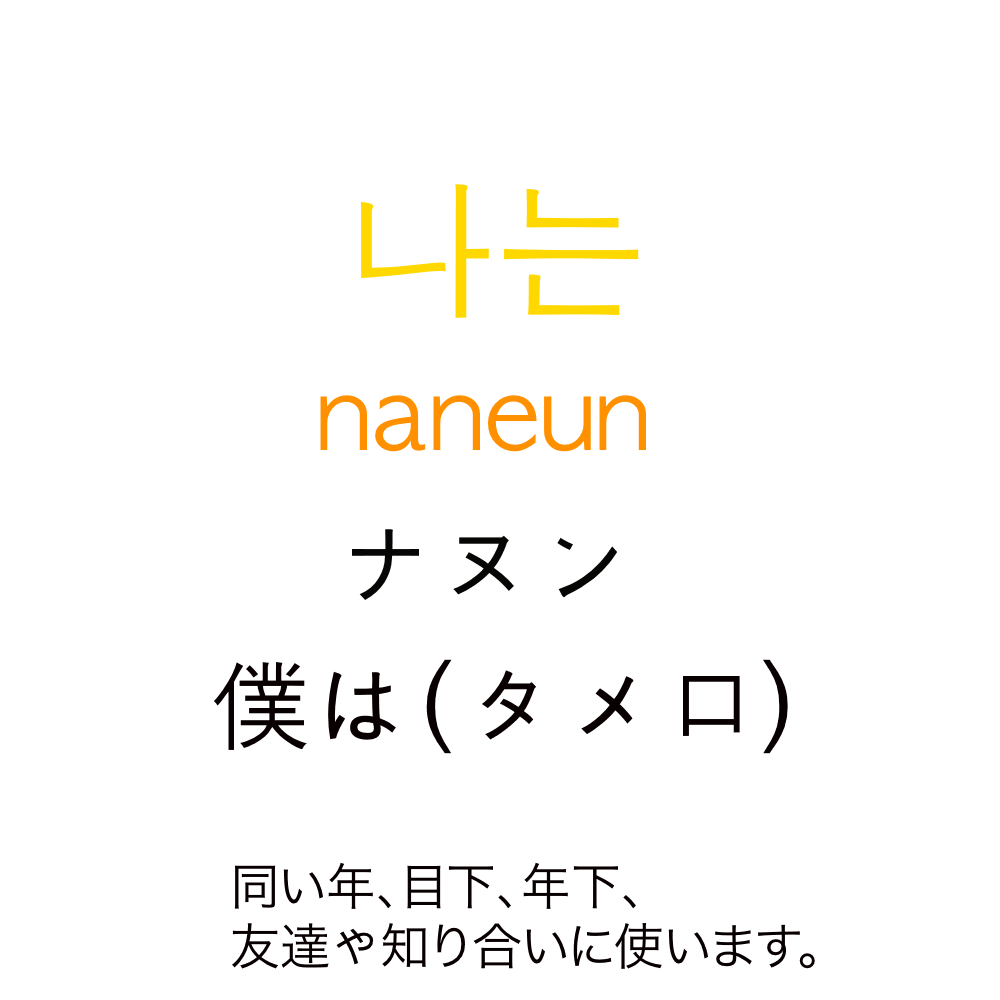
<style>
.page{position:relative;width:1000px;height:1000px;background:#ffffff}
.page>*{position:absolute;margin:0}
.t1{font:150px "AppleGothic";color:#ffd800}
.t2{font:100px "AppleGothic";color:#ff9000}
.t3{font:100px "AppleGothic";color:#060605}
.t4{font:100px "AppleGothic";color:#080000}
.t5{font:50px "HiraKakuProN-W3";color:#080000}
.t6{font:50px "AppleGothic";color:#080000}
</style>
<div class="page">
<p class="t1" style="left:360px;top:184px;width:279px;height:134px">나는</p>
<p class="t2" style="left:320px;top:395px;width:326px;height:57px">naneun</p>
<p class="t3" style="left:352px;top:529px;width:265px;height:71px">ナヌン</p>
<p class="t4" style="left:214px;top:659px;width:574px;height:95px">僕は(タメ口）</p>
<p class="t5" style="left:232px;top:862px;width:583px;height:107px">同い年、目下、年下、<br>友達<span class="t6">や</span>知り合いに使います。</p>
</div>
